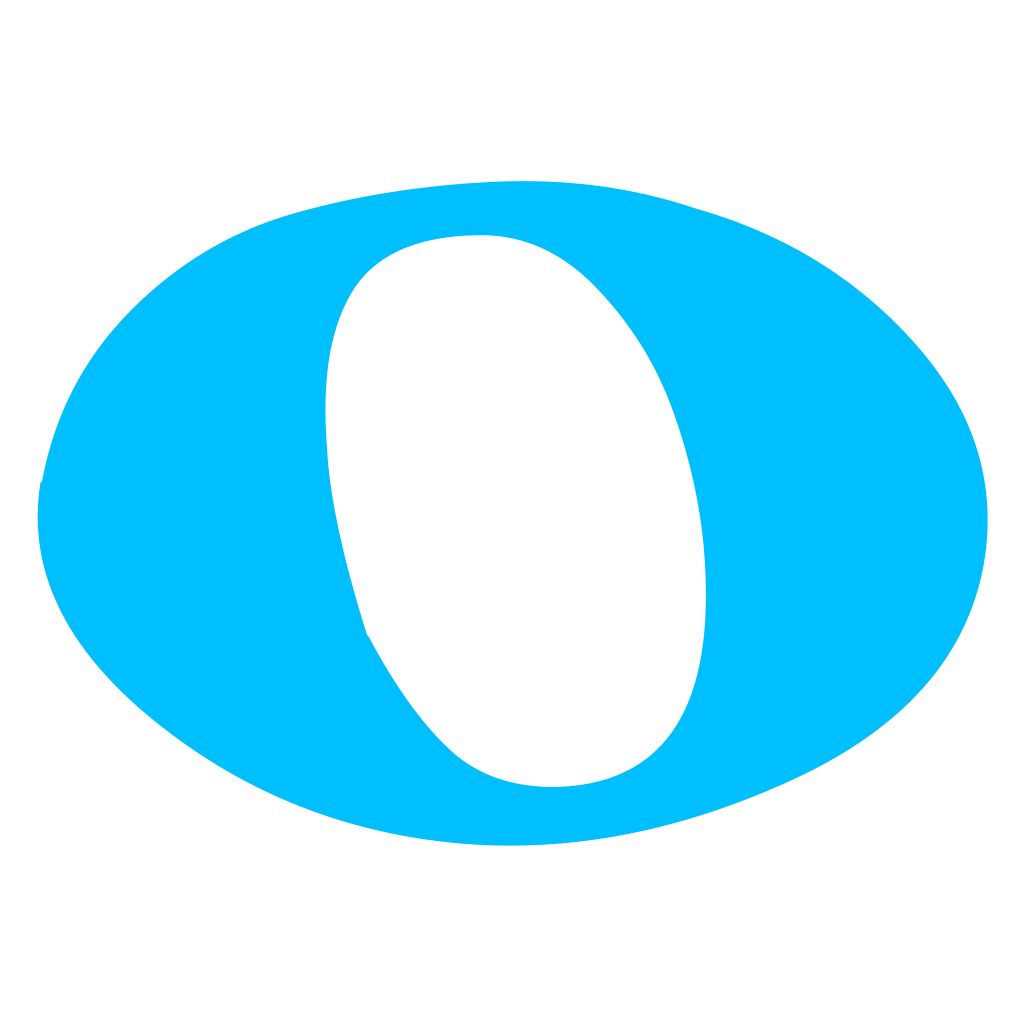
<style>
.page{position:relative;width:1024px;height:1024px;background:#ffffff}
.page>*{position:absolute;margin:0}
.t1{font:1666.7px "Tchaikovsky";letter-spacing:-0.05em;color:#00bfff}
</style>
<div class="page">
<p class="t1" style="left:37px;top:181px;width:951px;height:665px">o</p>
</div>
